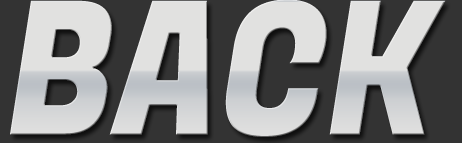
<style>
.page{position:relative;width:462px;height:143px;background:#333333}
.page>*{position:absolute;margin:0}
.t1{font:185.2px "FugazOne-Regular";color:#dfdfdf;scale:0.89 1}
</style>
<div class="page">
<p class="t1" style="left:10px;top:0px;width:436px;height:137px">BACK</p>
</div>
